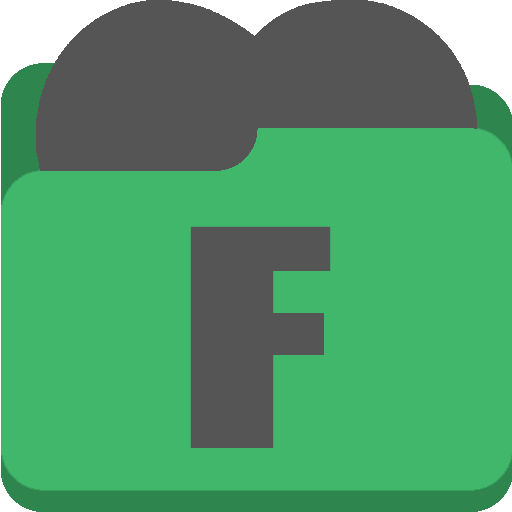
<style>
.page{position:relative;width:512px;height:512px;background:#40b76b}
.page>*{position:absolute;margin:0}
.t1{font:280px "Impact";letter-spacing:0.01em;color:#555555;scale:1.43 1}
</style>
<div class="page">
<p class="t1" style="left:190px;top:226px;width:141px;height:222px">F</p>
</div>
